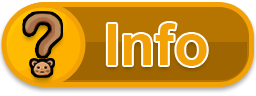
<style>
.page{position:relative;width:256px;height:96px}
.page>*{position:absolute;margin:0}
.t1{font:57.2px "Arial-BoldMT";color:#f2a207}
</style>
<div class="page">
<p class="t1" style="left:107px;top:23px;width:100px;height:43px">Info</p>
</div>
